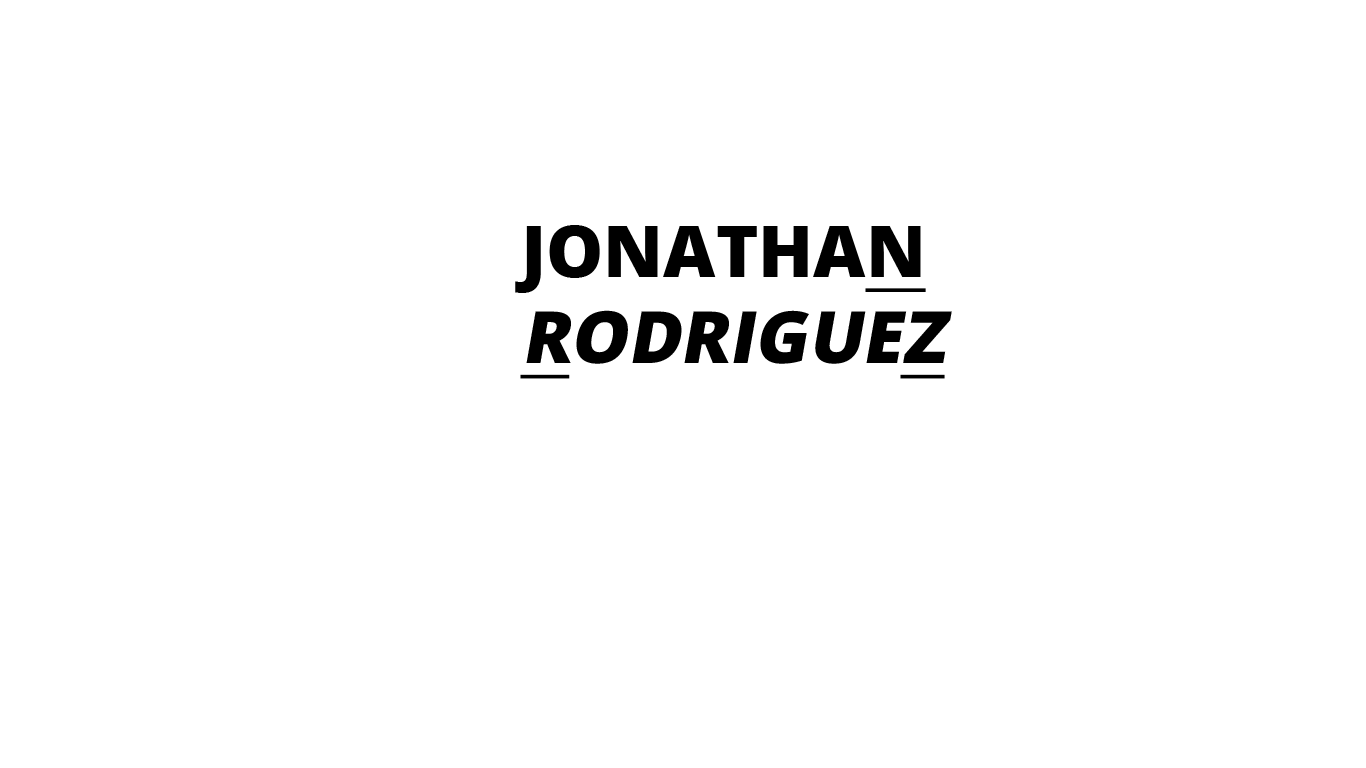
<style>
.page{position:relative;width:1366px;height:768px;background:#ffffff}
.page>*{position:absolute;margin:0}
.t1{font:72px "OpenSans-Extrabold";color:#000000}
.t2{font:72px "OpenSans-Extrabold";color:#000000;text-decoration:underline}
.t3{font:72px "OpenSans-Extrabold";color:#000000;text-transform:uppercase;font-style:italic;text-decoration:underline}
.t4{font:72px "OpenSans-Extrabold";color:#000000;text-transform:uppercase;font-style:italic}
</style>
<div class="page">
<p class="t1" style="left:515px;top:225px;width:437px;height:154px">JONATHA<span class="t2">N<br></span><span class="t3">R</span><span class="t4">ODRIGUE</span><span class="t3">Z</span></p>
</div>
